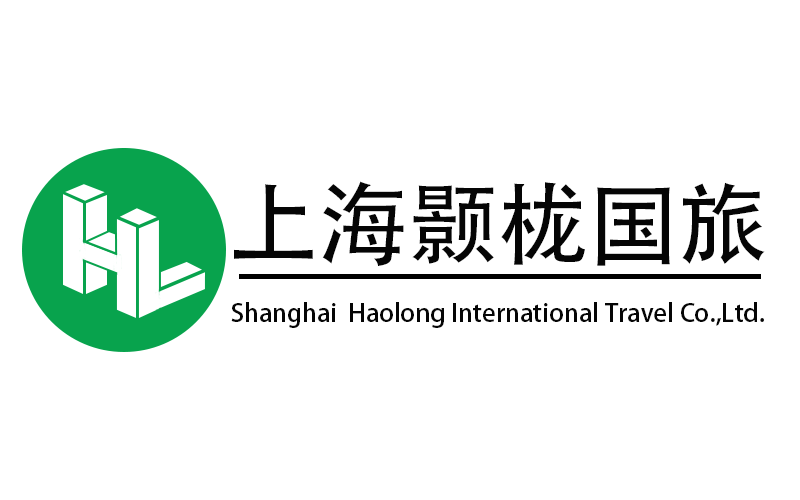
<style>
.page{position:relative;width:800px;height:500px;background:#ffffff}
.page>*{position:absolute;margin:0}
.t1{font:90px "AdobeHeitiStd-Regular";color:#050505}
.t2{font:25px "AdobeHeitiStd-Regular";color:#050505}
</style>
<div class="page">
<p class="t1" style="left:234px;top:181px;width:531px;height:85px">上海颢栊国旅</p>
<p class="t2" style="left:231px;top:302px;width:533px;height:26px">Shanghai  Haolong International Travel Co.,Ltd.</p>
</div>
